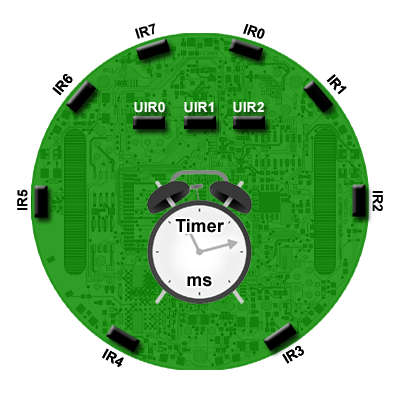
<style>
.page{position:relative;width:400px;height:400px;background:#ffffff}
.page>*{position:absolute;margin:0}
.t1{font:14px "Arial-BoldMT";color:#000000}
.t2{font:14px "Arial-BoldMT";color:#ffffff}
.t3{font:18px "Arial-BoldMT";color:#000000}
</style>
<div class="page">
<p class="t1" style="left:135px;top:23px;width:20px;height:16px;rotate:-17deg">IR7</p>
<p class="t1" style="left:243px;top:23px;width:22px;height:16px;rotate:20deg">IR0</p>
<p class="t1" style="left:52px;top:74px;width:21px;height:22px;rotate:-49deg">IR6</p>
<p class="t1" style="left:326px;top:74px;width:21px;height:21px;rotate:49deg">IR1</p>
<p class="t2" style="left:134px;top:102px;width:31px;height:11px">UIR0</p>
<p class="t2" style="left:184px;top:102px;width:30px;height:11px">UIR1</p>
<p class="t2" style="left:233px;top:102px;width:31px;height:11px">UIR2</p>
<p class="t1" style="left:17px;top:189px;width:11px;height:21px;rotate:-90deg">IR5</p>
<p class="t1" style="left:372px;top:191px;width:11px;height:20px;rotate:90deg">IR2</p>
<p class="t3" style="left:175px;top:219px;width:49px;height:14px">Timer</p>
<p class="t3" style="left:187px;top:276px;width:25px;height:11px">ms</p>
<p class="t1" style="left:102px;top:348px;width:22px;height:19px;rotate:29deg">IR4</p>
<p class="t1" style="left:282px;top:345px;width:22px;height:19px;rotate:-32deg">IR3</p>
</div>
